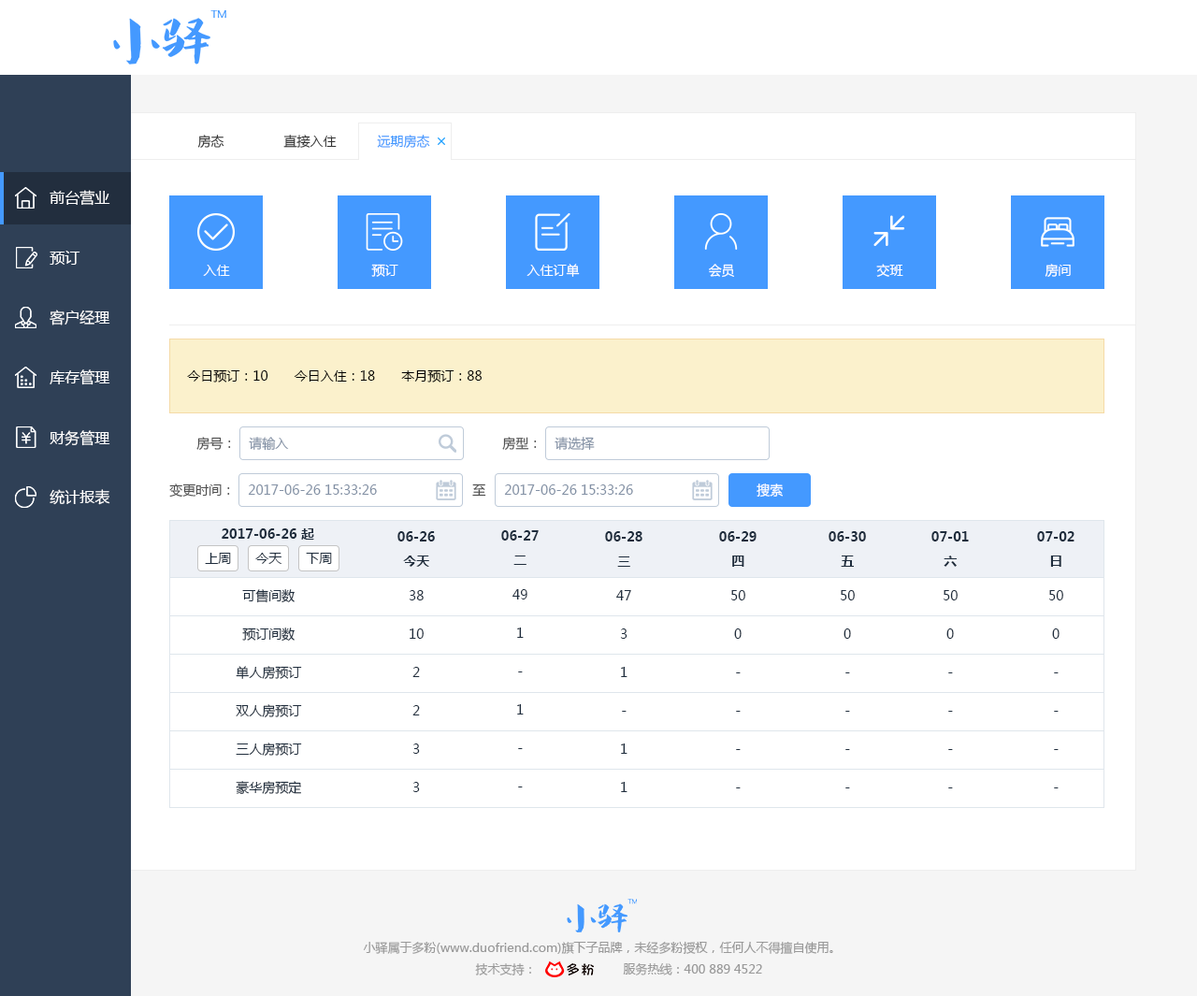
<style>
.page{position:relative;width:1197px;height:996px;background:#ffffff}
.page>*{position:absolute;margin:0}
.t1{font:13.1px "MicrosoftYaHei";color:#333333}
.t2{font:13.1px "MicrosoftYaHei";color:#4499ff}
.t3{font:15px "MicrosoftYaHei";color:#ffffff}
.t4{font:13.1px "MicrosoftYaHei";color:#ffffff}
.t5{font:13.1px "MicrosoftYaHei";color:#000000}
.t6{font:13.1px "MicrosoftYaHei";color:#505050}
.t7{font:13.1px "MicrosoftYaHei";color:#8391a5}
.t8{font:13.1px "MicrosoftYaHei-Bold";color:#1f2d3d}
.t9{font:13.1px "MicrosoftYaHei";color:#1f2d3d}
.t10{font:12.2px "MicrosoftYaHei";color:#999999}
</style>
<div class="page">
<p class="t1" style="left:197px;top:135px;width:27px;height:13px">房态</p>
<p class="t1" style="left:283px;top:135px;width:54px;height:13px">直接入住</p>
<p class="t2" style="left:377px;top:135px;width:53px;height:13px">远期房态</p>
<p class="t3" style="left:50px;top:190px;width:60px;height:16px">前台营业</p>
<p class="t3" style="left:50px;top:251px;width:30px;height:14px">预订</p>
<p class="t4" style="left:203px;top:265px;width:27px;height:11px">入住</p>
<p class="t4" style="left:371px;top:264px;width:27px;height:13px">预订</p>
<p class="t4" style="left:527px;top:264px;width:53px;height:13px">入住订单</p>
<p class="t4" style="left:709px;top:264px;width:25px;height:14px">会员</p>
<p class="t4" style="left:876px;top:264px;width:27px;height:13px">交班</p>
<p class="t4" style="left:1045px;top:264px;width:26px;height:13px">房间</p>
<p class="t3" style="left:50px;top:310px;width:60px;height:15px">客户经理</p>
<p class="t3" style="left:50px;top:369px;width:60px;height:16px">库存管理</p>
<p class="t5" style="left:187px;top:369px;width:295px;height:14px">今日预订：10　　今日入住：18　　本月预订：88</p>
<p class="t3" style="left:50px;top:430px;width:60px;height:16px">财务管理</p>
<p class="t6" style="left:196px;top:437px;width:35px;height:14px">房号：</p>
<p class="t7" style="left:249px;top:437px;width:40px;height:14px">请输入</p>
<p class="t6" style="left:502px;top:437px;width:35px;height:14px">房型：</p>
<p class="t7" style="left:555px;top:437px;width:40px;height:13px">请选择</p>
<p class="t6" style="left:169px;top:484px;width:61px;height:14px">变更时间：</p>
<p class="t7" style="left:248px;top:484px;width:129px;height:11px">2017-06-26 15:33:26</p>
<p class="t6" style="left:472px;top:484px;width:14px;height:13px">至</p>
<p class="t7" style="left:504px;top:484px;width:129px;height:11px">2017-06-26 15:33:26</p>
<p class="t4" style="left:757px;top:484px;width:26px;height:14px">搜索</p>
<p class="t3" style="left:50px;top:489px;width:60px;height:16px">统计报表</p>
<p class="t8" style="left:222px;top:528px;width:92px;height:12px">2017-06-26 起</p>
<p class="t8" style="left:397px;top:531px;width:38px;height:11px">06-26</p>
<p class="t8" style="left:501px;top:530px;width:38px;height:11px">06-27</p>
<p class="t8" style="left:605px;top:531px;width:38px;height:11px">06-28</p>
<p class="t8" style="left:719px;top:531px;width:38px;height:11px">06-29</p>
<p class="t8" style="left:829px;top:531px;width:37px;height:11px">06-30</p>
<p class="t8" style="left:932px;top:531px;width:37px;height:11px">07-01</p>
<p class="t8" style="left:1037px;top:531px;width:38px;height:11px">07-02</p>
<p class="t9" style="left:205px;top:553px;width:26px;height:11px">上周</p>
<p class="t9" style="left:255px;top:553px;width:27px;height:11px">今天</p>
<p class="t9" style="left:306px;top:553px;width:26px;height:11px">下周</p>
<p class="t8" style="left:403px;top:556px;width:26px;height:11px">今天</p>
<p class="t8" style="left:513px;top:556px;width:14px;height:9px">二</p>
<p class="t8" style="left:617px;top:556px;width:13px;height:11px">三</p>
<p class="t8" style="left:732px;top:556px;width:12px;height:11px">四</p>
<p class="t8" style="left:841px;top:556px;width:13px;height:11px">五</p>
<p class="t8" style="left:944px;top:556px;width:13px;height:11px">六</p>
<p class="t8" style="left:1050px;top:556px;width:12px;height:11px">日</p>
<p class="t9" style="left:242px;top:589px;width:53px;height:14px">可售间数</p>
<p class="t9" style="left:409px;top:590px;width:15px;height:10px">38</p>
<p class="t9" style="left:513px;top:589px;width:14px;height:11px">49</p>
<p class="t9" style="left:616px;top:590px;width:15px;height:10px">47</p>
<p class="t9" style="left:731px;top:590px;width:14px;height:10px">50</p>
<p class="t9" style="left:841px;top:590px;width:14px;height:10px">50</p>
<p class="t9" style="left:944px;top:590px;width:14px;height:10px">50</p>
<p class="t9" style="left:1049px;top:590px;width:14px;height:10px">50</p>
<p class="t9" style="left:242px;top:628px;width:53px;height:13px">预订间数</p>
<p class="t9" style="left:410px;top:629px;width:14px;height:10px">10</p>
<p class="t9" style="left:517px;top:628px;width:7px;height:10px">1</p>
<p class="t9" style="left:620px;top:629px;width:8px;height:10px">3</p>
<p class="t9" style="left:734px;top:629px;width:8px;height:10px">0</p>
<p class="t9" style="left:844px;top:629px;width:7px;height:10px">0</p>
<p class="t9" style="left:946px;top:629px;width:8px;height:10px">0</p>
<p class="t9" style="left:1052px;top:629px;width:8px;height:10px">0</p>
<p class="t9" style="left:236px;top:666px;width:66px;height:14px">单人房预订</p>
<p class="t9" style="left:412px;top:667px;width:8px;height:10px">2</p>
<p class="t9" style="left:518px;top:672px;width:5px;height:0px">-</p>
<p class="t9" style="left:621px;top:667px;width:7px;height:10px">1</p>
<p class="t9" style="left:736px;top:672px;width:5px;height:1px">-</p>
<p class="t9" style="left:845px;top:672px;width:5px;height:1px">-</p>
<p class="t9" style="left:948px;top:672px;width:5px;height:1px">-</p>
<p class="t9" style="left:1054px;top:672px;width:5px;height:1px">-</p>
<p class="t9" style="left:236px;top:704px;width:66px;height:14px">双人房预订</p>
<p class="t9" style="left:412px;top:705px;width:8px;height:10px">2</p>
<p class="t9" style="left:517px;top:704px;width:7px;height:11px">1</p>
<p class="t9" style="left:622px;top:711px;width:5px;height:1px">-</p>
<p class="t9" style="left:736px;top:711px;width:5px;height:1px">-</p>
<p class="t9" style="left:845px;top:711px;width:5px;height:1px">-</p>
<p class="t9" style="left:948px;top:711px;width:5px;height:1px">-</p>
<p class="t9" style="left:1054px;top:711px;width:5px;height:1px">-</p>
<p class="t9" style="left:236px;top:743px;width:66px;height:14px">三人房预订</p>
<p class="t9" style="left:412px;top:744px;width:8px;height:10px">3</p>
<p class="t9" style="left:518px;top:748px;width:5px;height:1px">-</p>
<p class="t9" style="left:621px;top:744px;width:7px;height:10px">1</p>
<p class="t9" style="left:736px;top:749px;width:5px;height:1px">-</p>
<p class="t9" style="left:845px;top:749px;width:5px;height:1px">-</p>
<p class="t9" style="left:948px;top:749px;width:5px;height:1px">-</p>
<p class="t9" style="left:1054px;top:749px;width:5px;height:1px">-</p>
<p class="t9" style="left:236px;top:781px;width:65px;height:14px">豪华房预定</p>
<p class="t9" style="left:412px;top:782px;width:8px;height:10px">3</p>
<p class="t9" style="left:621px;top:782px;width:7px;height:10px">1</p>
<p class="t9" style="left:518px;top:787px;width:5px;height:0px">-</p>
<p class="t9" style="left:736px;top:787px;width:5px;height:1px">-</p>
<p class="t9" style="left:845px;top:787px;width:5px;height:1px">-</p>
<p class="t9" style="left:948px;top:787px;width:5px;height:1px">-</p>
<p class="t9" style="left:1054px;top:787px;width:5px;height:1px">-</p>
<p class="t10" style="left:363px;top:941px;width:470px;height:13px">小驿属于多粉(www.duofriend.com)旗下子品牌，未经多粉授权，任何人不得擅自使用。</p>
<p class="t10" style="left:475px;top:963px;width:56px;height:12px">技术支持：</p>
<p class="t10" style="left:623px;top:963px;width:139px;height:12px">服务热线：400 889 4522</p>
</div>
